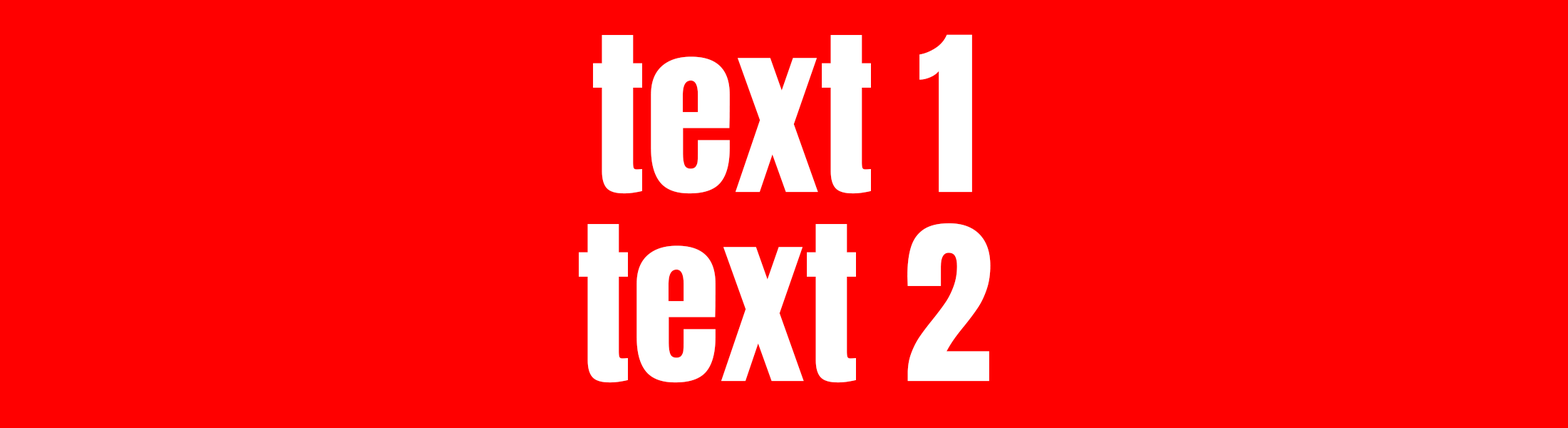
<style>
.page{position:relative;width:1568px;height:428px;background:#ff0000}
.page>*{position:absolute;margin:0}
.t1{font:182.5px "Anton-Regular";color:#ffffff}
</style>
<div class="page">
<p class="t1" style="left:593px;top:34px;width:379px;height:160px">text 1</p>
<p class="t1" style="left:579px;top:223px;width:412px;height:160px">text 2</p>
</div>
